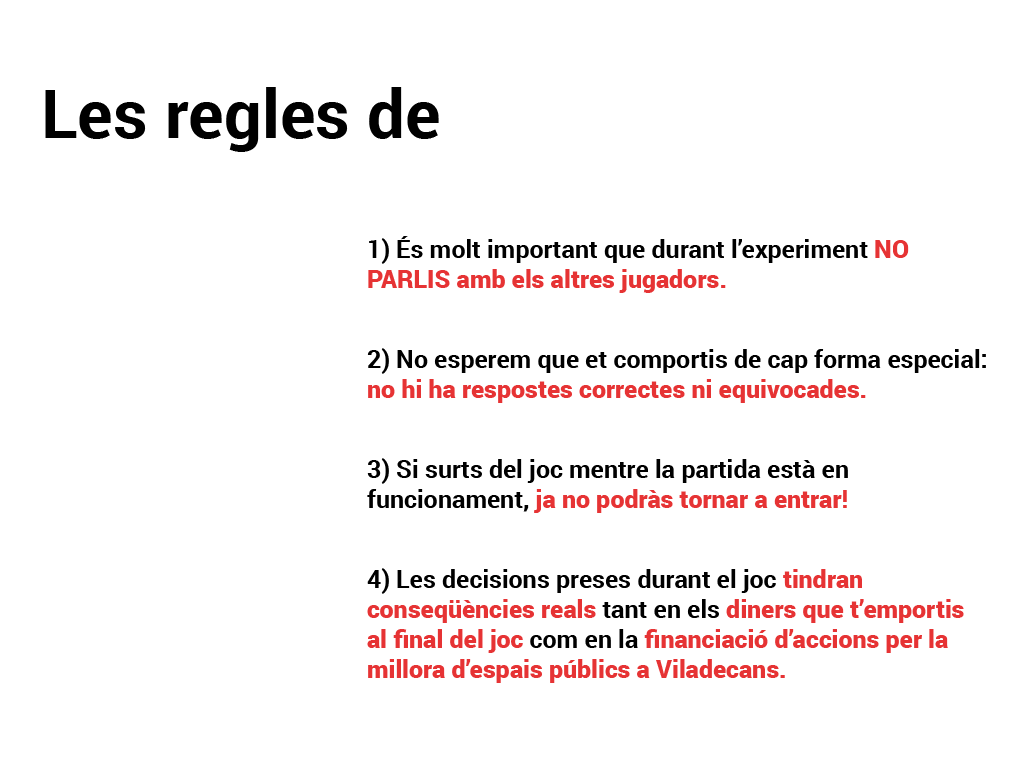
<style>
.page{position:relative;width:1024px;height:768px;background:#ffffff}
.page>*{position:absolute;margin:0}
.t1{font:67.3px "Roboto-Bold";color:#000000}
.t2{font:25px "Roboto-Black";color:#e63334}
.t3{font:25px "Roboto-Bold";color:#000000}
.t4{font:25px "Roboto-Bold";color:#e63334}
</style>
<div class="page">
<p class="t1" style="left:45px;top:87px;width:394px;height:65px">Les regles de</p>
<p class="t2" style="left:367px;top:236px;width:619px;height:447px"><span class="t3">1) És molt important que durant l’experiment </span>NO <br>PARLIS amb els altres jugadors.<br><br><span class="t3">2) No esperem que et comportis de cap forma especial: <br></span>no hi ha respostes correctes ni equivocades.<br><br><span class="t3">3) Si surts del joc mentre la partida està en <br>funcionament, </span>ja no podràs tornar a entrar<span class="t4">!<br><br></span><span class="t3">4) Les decisions preses durant el joc </span>tindran<br>conseqüències reals<span class="t3"> tant en els </span>diners que t’emportis <br>al final del joc<span class="t3"> com en la </span>financiació d’accions per la <br>millora d’espais públics a Viladecans.</p>
</div>
